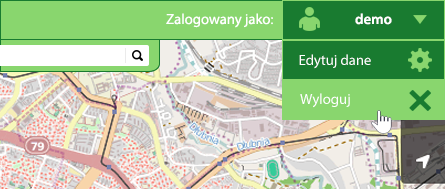
<style>
.page{position:relative;width:445px;height:189px;background:#89d66e}
.page>*{position:absolute;margin:0}
.t1{font:14.7px "MyriadPro-Regular";color:#ffffff}
.t2{font:14.7px "MyriadPro-Semibold";color:#ffffff}
</style>
<div class="page">
<p class="t1" style="left:166px;top:13px;width:226px;height:15px">Zalogowany jako:                           <span class="t2">demo</span></p>
<p class="t1" style="left:299px;top:54px;width:72px;height:15px">Edytuj dane</p>
<p class="t1" style="left:300px;top:93px;width:50px;height:15px">Wyloguj</p>
</div>
